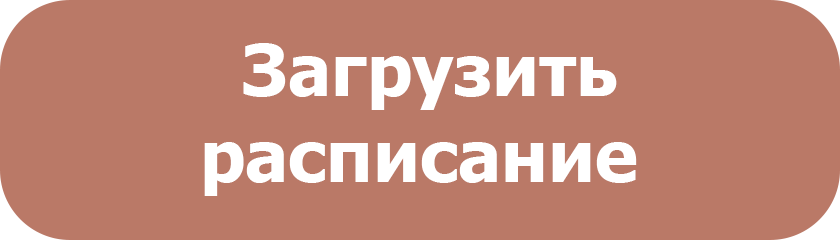
<style>
.page{position:relative;width:840px;height:240px;background:#ba7967}
.page>*{position:absolute;margin:0}
.t1{font:72px "Tahoma-Bold";color:#ffffff}
</style>
<div class="page">
<p class="t1" style="left:204px;top:43px;width:433px;height:153px">Загрузить<br>расписание</p>
</div>
